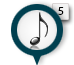
<style>
.page{position:relative;width:74px;height:65px;background:#ffffff}
.page>*{position:absolute;margin:0}
.t1{font:12px "MyriadPro-Regular";color:#000000}
</style>
<div class="page">
<p class="t1" style="left:58px;top:7px;width:6px;height:8px">5</p>
</div>
